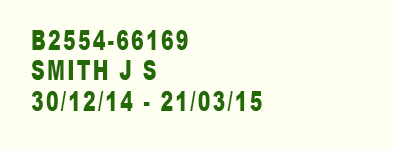
<style>
.page{position:relative;width:394px;height:150px;background:#fefff0}
.page>*{position:absolute;margin:0}
.t1{font:27.8px/30.6px "Arial-Black";letter-spacing:0.1em;color:#236906;scale:0.7 1}
</style>
<div class="page">
<p class="t1" style="left:31px;top:30px;width:231px;height:81px">B2554-66169<br>SMITH J S<br>30/12/14 - 21/03/15</p>
</div>
